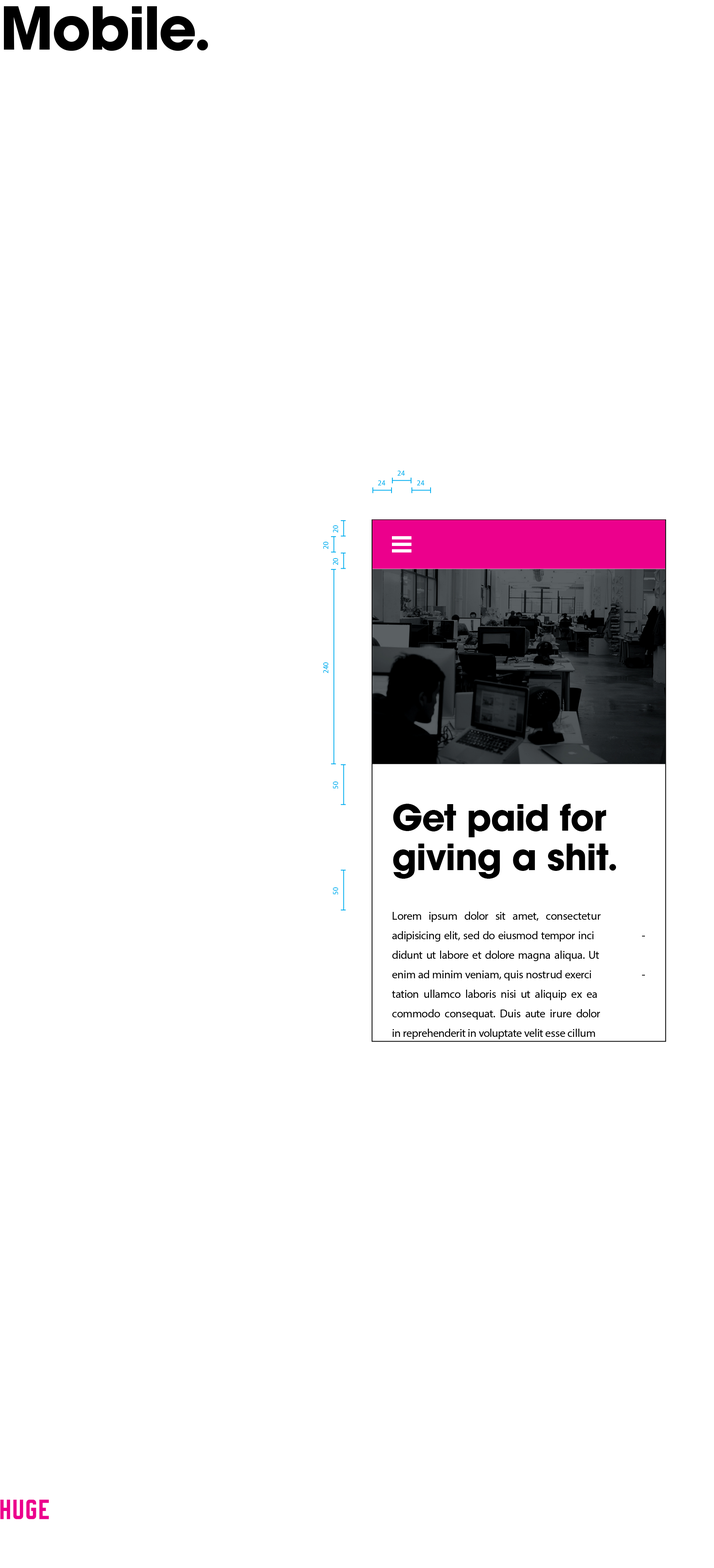
<style>
.page{position:relative;width:714px;height:1568px;background:#ffffff}
.page>*{position:absolute;margin:0}
.t1{font:58.6px "HUGE-AvantGarde-Bold";letter-spacing:-0.026em;color:#000000}
.t2{font:58.6px "HUGE-AvantGarde-Bold";letter-spacing:-0.029em;color:#000000}
.t3{font:58.6px "HUGE-AvantGarde-Bold";letter-spacing:-0.06em;color:#000000}
.t4{font:58.6px "HUGE-AvantGarde-Bold";color:#000000}
.t5{font:7.3px "GalaxieCopernicus-Book";letter-spacing:0.013em;color:#00adef}
.t6{font:7.3px "GalaxieCopernicus-Book";color:#00adef}
.t7{font:7.3px "GalaxieCopernicus-Book";letter-spacing:0.006em;color:#00adef}
.t8{font:7.3px "GalaxieCopernicus-Book";letter-spacing:-0.005em;color:#00adef}
.t9{font:7.3px "GalaxieCopernicus-Book";letter-spacing:0.003em;color:#00adef}
.t10{font:35.8px "HUGE-AvantGarde-Bold";letter-spacing:-0.02em;color:#000000}
.t11{font:35.8px "HUGE-AvantGarde-Bold";letter-spacing:-0.026em;color:#000000}
.t12{font:35.8px "HUGE-AvantGarde-Bold";letter-spacing:-0.015em;color:#000000}
.t13{font:35.8px "HUGE-AvantGarde-Bold";letter-spacing:-0.023em;color:#000000}
.t14{font:35.8px "HUGE-AvantGarde-Bold";letter-spacing:-0.019em;color:#000000}
.t15{font:35.8px "HUGE-AvantGarde-Bold";letter-spacing:-0.018em;color:#000000}
.t16{font:35.8px "HUGE-AvantGarde-Bold";letter-spacing:-0.014em;color:#000000}
.t17{font:35.8px "HUGE-AvantGarde-Bold";letter-spacing:-0.021em;color:#000000}
.t18{font:35.8px "HUGE-AvantGarde-Bold";color:#000000}
.t19{font:35.8px "HUGE-AvantGarde-Bold";letter-spacing:-0.017em;color:#000000}
.t20{font:35.8px "HUGE-AvantGarde-Bold";letter-spacing:-0.029em;color:#000000}
.t21{font:35.8px "HUGE-AvantGarde-Bold";letter-spacing:-0.012em;color:#000000}
.t22{font:35.8px "HUGE-AvantGarde-Bold";letter-spacing:-0.046em;color:#000000}
.t23{font:11.4px "GalaxieCopernicus-Book";letter-spacing:0.008em;color:#000000}
.t24{font:11.4px "GalaxieCopernicus-Book";letter-spacing:-0.034em;color:#000000}
.t25{font:11.4px "GalaxieCopernicus-Book";letter-spacing:-0.02em;color:#000000}
.t26{font:11.4px "GalaxieCopernicus-Book";letter-spacing:-0.027em;color:#000000}
.t27{font:11.4px "GalaxieCopernicus-Book";color:#000000}
.t28{font:11.4px "GalaxieCopernicus-Book";letter-spacing:-0.037em;color:#000000}
.t29{font:11.4px "GalaxieCopernicus-Book";letter-spacing:-0.007em;color:#000000}
.t30{font:11.4px "GalaxieCopernicus-Book";letter-spacing:-0.011em;color:#000000}
.t31{font:11.4px "GalaxieCopernicus-Book";letter-spacing:-0.005em;color:#000000}
.t32{font:11.4px "GalaxieCopernicus-Book";letter-spacing:-0.023em;color:#000000}
.t33{font:11.4px "GalaxieCopernicus-Book";letter-spacing:-0.029em;color:#000000}
.t34{font:11.4px "GalaxieCopernicus-Book";letter-spacing:-0.03em;color:#000000}
.t35{font:11.4px "GalaxieCopernicus-Book";letter-spacing:-0.033em;color:#000000}
.t36{font:11.4px "GalaxieCopernicus-Book";letter-spacing:0.001em;color:#000000}
.t37{font:11.4px "GalaxieCopernicus-Book";letter-spacing:-0.017em;color:#000000}
.t38{font:11.4px "GalaxieCopernicus-Book";letter-spacing:-0.013em;color:#000000}
.t39{font:11.4px "GalaxieCopernicus-Book";letter-spacing:-0.006em;color:#000000}
.t40{font:11.4px "GalaxieCopernicus-Book";letter-spacing:-0.001em;color:#000000}
.t41{font:11.4px "GalaxieCopernicus-Book";letter-spacing:-0.008em;color:#000000}
.t42{font:11.4px "GalaxieCopernicus-Book";letter-spacing:-0.025em;color:#000000}
.t43{font:11.4px "GalaxieCopernicus-Book";letter-spacing:0.005em;color:#000000}
.t44{font:11.4px "GalaxieCopernicus-Book";letter-spacing:-0.002em;color:#000000}
.t45{font:11.4px "GalaxieCopernicus-Book";letter-spacing:-0.031em;color:#000000}
.t46{font:11.4px "GalaxieCopernicus-Book";letter-spacing:-0.012em;color:#000000}
.t47{font:11.4px "GalaxieCopernicus-Book";letter-spacing:-0.018em;color:#000000}
.t48{font:11.4px "GalaxieCopernicus-Book";letter-spacing:-0.009em;color:#000000}
.t49{font:11.4px "GalaxieCopernicus-Book";letter-spacing:-0.014em;color:#000000}
.t50{font:11.4px "GalaxieCopernicus-Book";letter-spacing:-0.028em;color:#000000}
.t51{font:11.4px "GalaxieCopernicus-Book";letter-spacing:-0.038em;color:#000000}
.t52{font:11.4px "GalaxieCopernicus-Book";letter-spacing:-0.035em;color:#000000}
.t53{font:11.4px "GalaxieCopernicus-Book";letter-spacing:-0.024em;color:#000000}
.t54{font:11.4px "GalaxieCopernicus-Book";letter-spacing:-0.016em;color:#000000}
.t55{font:11.4px "GalaxieCopernicus-Book";letter-spacing:-0.004em;color:#000000}
.t56{font:11.4px "GalaxieCopernicus-Book";letter-spacing:-0.019em;color:#000000}
.t57{font:11.4px "GalaxieCopernicus-Book";letter-spacing:0.01em;color:#000000}
.t58{font:11.4px "GalaxieCopernicus-Book";letter-spacing:-0.015em;color:#000000}
.t59{font:11.4px "GalaxieCopernicus-Book";letter-spacing:-0.003em;color:#000000}
.t60{font:11.4px "GalaxieCopernicus-Book";letter-spacing:0.02em;color:#000000}
.t61{font:11.4px "GalaxieCopernicus-Book";letter-spacing:-0.026em;color:#000000}
.t62{font:11.4px "GalaxieCopernicus-Book";letter-spacing:-0.021em;color:#000000}
.t63{font:11.4px "GalaxieCopernicus-Book";letter-spacing:-0.01em;color:#000000}
.t64{font:11.4px "GalaxieCopernicus-Book";letter-spacing:0.002em;color:#000000}
.t65{font:11.4px "GalaxieCopernicus-Book";letter-spacing:0.009em;color:#000000}
.t66{font:11.4px "GalaxieCopernicus-Book";letter-spacing:-0.032em;color:#000000}
</style>
<div class="page">
<p class="t1" style="left:4px;top:6px;width:204px;height:45px">M<span class="t2">o</span>bil<span class="t3">e</span><span class="t4">.</span></p>
<p class="t5" style="left:398px;top:471px;width:7px;height:5px">2<span class="t6">4</span></p>
<p class="t5" style="left:378px;top:480px;width:7px;height:5px">2<span class="t6">4</span></p>
<p class="t5" style="left:417px;top:480px;width:8px;height:5px">2<span class="t6">4</span></p>
<p class="t7" style="left:333px;top:525px;width:5px;height:8px">2<span class="t6">0</span></p>
<p class="t7" style="left:323px;top:542px;width:5px;height:7px">2<span class="t6">0</span></p>
<p class="t7" style="left:333px;top:558px;width:5px;height:7px">2<span class="t6">0</span></p>
<p class="t5" style="left:323px;top:662px;width:5px;height:11px">2<span class="t8">4</span><span class="t6">0</span></p>
<p class="t9" style="left:333px;top:781px;width:5px;height:8px">5<span class="t6">0</span></p>
<p class="t10" style="left:393px;top:804px;width:214px;height:33px">G<span class="t11">e</span><span class="t12">t </span><span class="t13">p</span><span class="t14">a</span><span class="t15">i</span><span class="t16">d </span><span class="t11">f</span><span class="t17">o</span><span class="t18">r</span></p>
<p class="t12" style="left:393px;top:844px;width:223px;height:35px"><span class="t19">g</span><span class="t20">iv</span><span class="t15">i</span><span class="t17">n</span>g a <span class="t21">s</span><span class="t15">h</span><span class="t21">i</span><span class="t22">t</span><span class="t18">.</span></p>
<p class="t9" style="left:333px;top:887px;width:5px;height:8px">5<span class="t6">0</span></p>
<p class="t23" style="left:393px;top:912px;width:208px;height:10px">L<span class="t24">o</span><span class="t25">r</span><span class="t26">e</span><span class="t27">m </span><span class="t28">i</span><span class="t29">p</span><span class="t30">s</span><span class="t31">u</span><span class="t27">m </span><span class="t32">d</span><span class="t33">o</span><span class="t34">l</span><span class="t24">o</span><span class="t27">r </span><span class="t35">s</span><span class="t28">i</span><span class="t27">t </span><span class="t36">a</span><span class="t32">m</span><span class="t37">e</span><span class="t38">t</span><span class="t27">, </span><span class="t29">c</span><span class="t24">o</span><span class="t39">n</span><span class="t30">s</span><span class="t40">e</span><span class="t41">c</span><span class="t42">t</span><span class="t37">e</span><span class="t43">t</span><span class="t31">u</span><span class="t27">r</span></p>
<p class="t27" style="left:392px;top:931px;width:202px;height:11px"><span class="t32">a</span><span class="t44">d</span><span class="t28">i</span><span class="t45">p</span><span class="t46">i</span><span class="t35">s</span><span class="t26">i</span><span class="t47">c</span><span class="t48">i</span><span class="t49">n</span>g <span class="t42">e</span><span class="t48">l</span><span class="t28">i</span><span class="t38">t</span>, <span class="t30">s</span><span class="t44">e</span>d <span class="t32">d</span>o <span class="t26">e</span><span class="t34">i</span><span class="t39">u</span><span class="t35">s</span><span class="t32">m</span>od <span class="t42">t</span><span class="t26">e</span><span class="t34">m</span>p<span class="t24">o</span>r <span class="t48">i</span><span class="t42">n</span><span class="t47">c</span>i</p>
<p class="t27" style="left:642px;top:936px;width:3px;height:1px">-</p>
<p class="t44" style="left:392px;top:951px;width:207px;height:10px">d<span class="t26">i</span><span class="t50">d</span><span class="t31">u</span><span class="t51">n</span><span class="t27">t </span><span class="t52">u</span><span class="t27">t </span><span class="t53">l</span><span class="t54">a</span><span class="t27">b</span><span class="t24">o</span><span class="t25">r</span><span class="t27">e </span><span class="t37">e</span><span class="t27">t </span><span class="t32">d</span><span class="t33">o</span><span class="t34">l</span><span class="t24">o</span><span class="t25">r</span><span class="t27">e </span><span class="t37">m</span><span class="t31">a</span><span class="t55">g</span><span class="t56">n</span><span class="t27">a </span><span class="t57">a</span><span class="t48">l</span><span class="t26">i</span><span class="t29">q</span><span class="t46">u</span><span class="t48">a</span><span class="t27">. </span><span class="t35">U</span><span class="t27">t</span></p>
<p class="t26" style="left:392px;top:970px;width:199px;height:11px">e<span class="t55">n</span><span class="t48">i</span><span class="t27">m </span><span class="t32">a</span><span class="t27">d </span><span class="t44">m</span><span class="t48">i</span><span class="t55">n</span><span class="t48">i</span><span class="t27">m </span><span class="t34">v</span>e<span class="t55">n</span><span class="t53">i</span><span class="t36">a</span><span class="t58">m</span><span class="t27">, </span><span class="t29">q</span><span class="t31">u</span><span class="t46">i</span><span class="t27">s </span><span class="t42">n</span><span class="t29">o</span><span class="t47">s</span><span class="t59">t</span><span class="t60">r</span><span class="t61">u</span><span class="t27">d </span><span class="t30">e</span><span class="t61">x</span>e<span class="t62">r</span><span class="t47">c</span><span class="t27">i</span></p>
<p class="t27" style="left:642px;top:975px;width:3px;height:1px">-</p>
<p class="t63" style="left:392px;top:990px;width:205px;height:10px">t<span class="t45">a</span><span class="t59">t</span><span class="t34">i</span><span class="t24">o</span><span class="t27">n </span><span class="t64">u</span><span class="t40">l</span><span class="t53">l</span><span class="t36">a</span><span class="t32">m</span><span class="t29">c</span><span class="t27">o </span><span class="t53">l</span><span class="t54">a</span><span class="t27">b</span><span class="t24">o</span><span class="t44">r</span><span class="t46">i</span><span class="t27">s </span><span class="t55">n</span><span class="t46">i</span><span class="t35">s</span><span class="t27">i </span><span class="t52">u</span><span class="t27">t </span><span class="t57">a</span><span class="t48">l</span><span class="t26">i</span><span class="t29">q</span><span class="t31">u</span><span class="t28">i</span><span class="t27">p </span><span class="t30">e</span><span class="t27">x </span><span class="t48">e</span><span class="t27">a</span></p>
<p class="t29" style="left:392px;top:1009px;width:208px;height:11px">c<span class="t24">o</span><span class="t44">m</span><span class="t32">m</span><span class="t27">o</span><span class="t32">d</span><span class="t27">o </span>c<span class="t24">o</span><span class="t39">n</span><span class="t30">s</span><span class="t44">e</span>q<span class="t46">u</span><span class="t45">a</span><span class="t38">t</span><span class="t27">. </span><span class="t65">D</span><span class="t31">u</span><span class="t46">i</span><span class="t27">s </span><span class="t28">a</span><span class="t52">u</span><span class="t42">t</span><span class="t27">e </span><span class="t48">i</span><span class="t60">r</span><span class="t31">u</span><span class="t25">r</span><span class="t27">e </span><span class="t32">d</span><span class="t33">o</span><span class="t34">l</span><span class="t24">o</span><span class="t27">r</span></p>
<p class="t53" style="left:392px;top:1029px;width:203px;height:10px"><span class="t48">i</span><span class="t27">n </span><span class="t25">r</span><span class="t38">e</span><span class="t45">p</span><span class="t25">r</span>eh<span class="t26">e</span><span class="t42">n</span><span class="t32">d</span><span class="t26">e</span><span class="t44">r</span><span class="t28">i</span><span class="t27">t </span><span class="t48">i</span><span class="t27">n </span><span class="t24">v</span><span class="t33">o</span><span class="t66">l</span><span class="t35">u</span><span class="t62">p</span><span class="t63">t</span><span class="t45">a</span><span class="t42">t</span><span class="t27">e </span><span class="t34">v</span>e<span class="t48">l</span><span class="t28">i</span><span class="t27">t </span><span class="t40">e</span><span class="t41">s</span><span class="t30">s</span><span class="t27">e </span><span class="t47">c</span><span class="t40">il</span><span class="t66">l</span><span class="t31">u</span><span class="t27">m</span></p>
</div>
